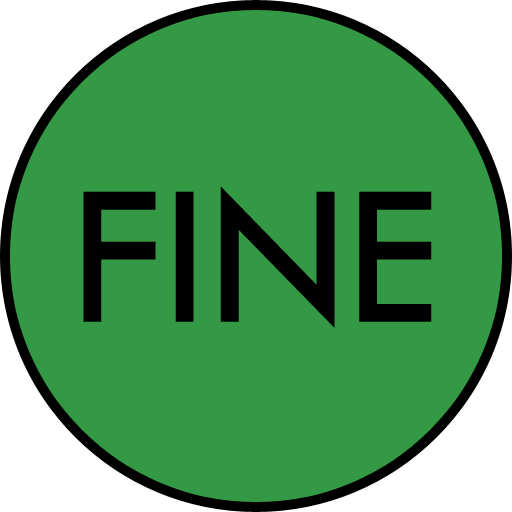
<style>
.page{position:relative;width:512px;height:512px;background:#339944}
.page>*{position:absolute;margin:0}
.t1{font:208.3px "TwCenMT-Regular";color:#000000}
</style>
<div class="page">
<p class="t1" style="left:83px;top:186px;width:349px;height:142px">FINE</p>
</div>
